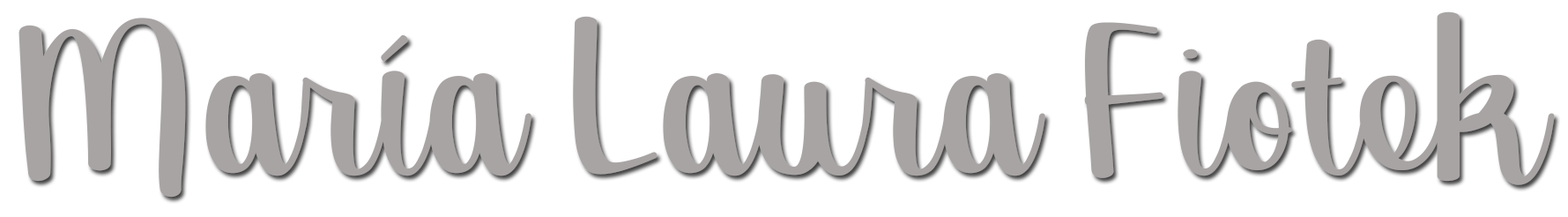
<style>
.page{position:relative;width:1568px;height:217px;background:#ffffff}
.page>*{position:absolute;margin:0}
.t1{font:319.1px "Georgina";color:#a9a4a4}
</style>
<div class="page">
<p class="t1" style="left:19px;top:11px;width:1536px;height:186px">María Laura Fiotek</p>
</div>
